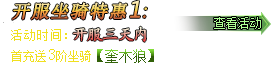
<style>
.page{position:relative;width:278px;height:82px;background:#ffffff}
.page>*{position:absolute;margin:0}
.t1{font:18px "SimSun";letter-spacing:0.05em;font-weight:bold;font-style:italic}
.t2{font:22px "MicrosoftYaHei";letter-spacing:0.05em;font-style:italic}
.t3{font:18px "MicrosoftYaHei";letter-spacing:0.05em;font-style:italic}
.t4{font:12px "SimSun";letter-spacing:0.01em;color:#f1e01f}
.t5{font:16px "SimSun";letter-spacing:0.01em;color:#f1e01f}
.t6{font:14px "SimSun"}
</style>
<div class="page">
<p class="t1" style="left:12px;top:0px;width:135px;height:20px">开服坐骑特惠<span class="t2">1</span><span class="t3">:</span></p>
<p class="t4" style="left:11px;top:49px;width:80px;height:13px">首充送<span class="t5">3</span>阶坐骑</p>
<p class="t6" style="left:97px;top:49px;width:57px;height:14px">【奎木狼】</p>
</div>
